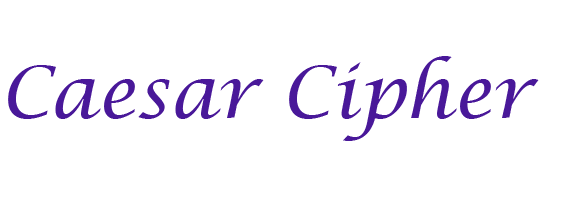
<style>
.page{position:relative;width:570px;height:200px;background:#ffffff}
.page>*{position:absolute;margin:0}
.t1{font:72px "LucidaCalligraphy-Italic";color:#491899}
</style>
<div class="page">
<p class="t1" style="left:8px;top:56px;width:531px;height:85px">Caesar Cipher</p>
</div>
